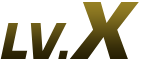
<style>
.page{position:relative;width:141px;height:62px;background:#ffffff}
.page>*{position:absolute;margin:0}
.t1{font:48px "Eurostile-BoldOblique"}
.t2{font:76px "Eurostile-BoldOblique"}
</style>
<div class="page">
<p class="t1" style="left:0px;top:2px;width:139px;height:57px">LV.<span class="t2">X</span></p>
</div>
